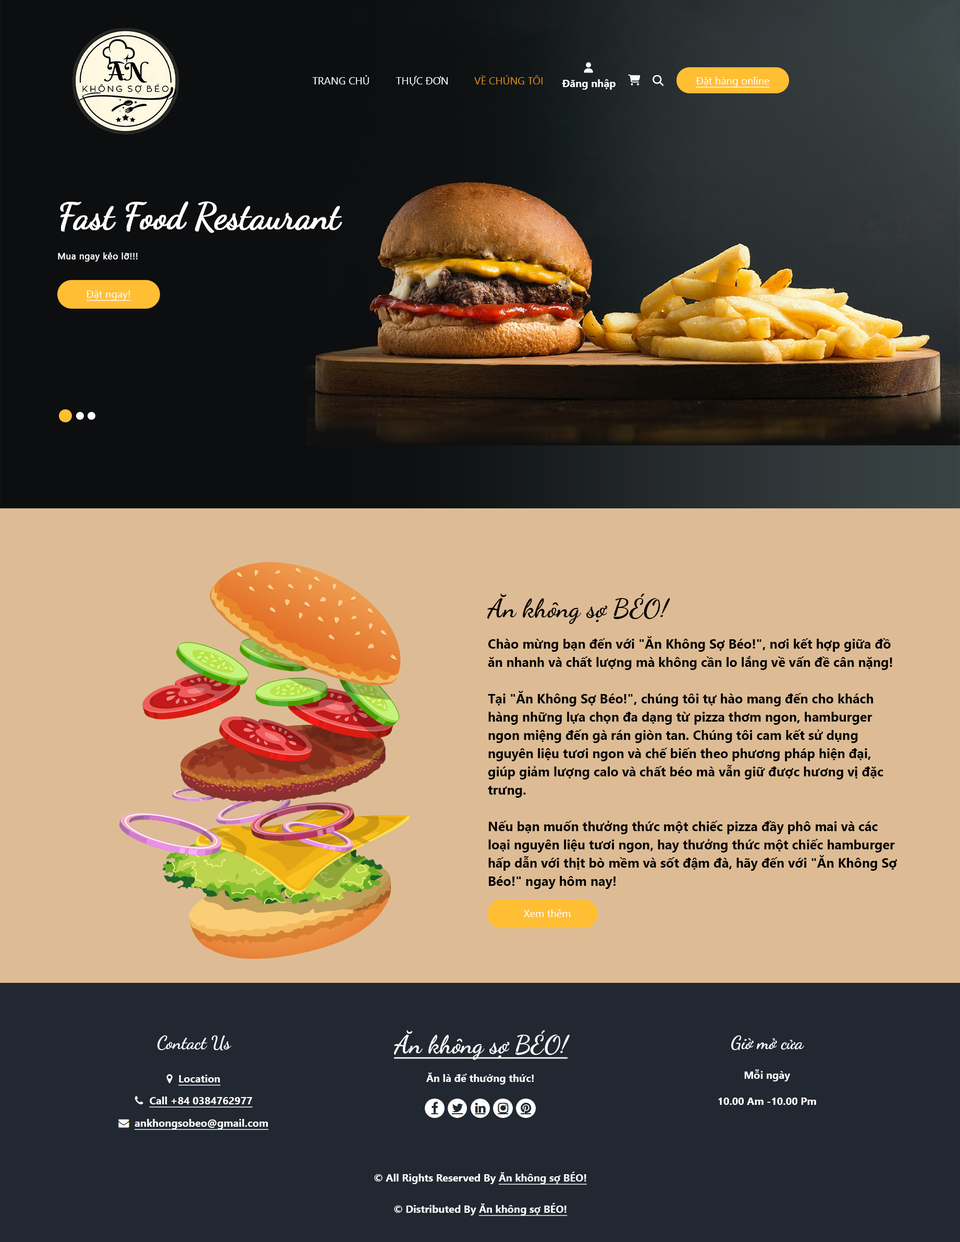
<style>
.page{position:relative;width:960px;height:1242px;background:#ddbc95}
.page>*{position:absolute;margin:0}
.t1{font:10.4px "SegoeUI";color:#ffffff}
.t2{font:10.4px "SegoeUI";color:#d18a19}
.t3{font:10.4px "SegoeUI";color:#ffffff;text-decoration:underline}
.t4{font:10.4px "SegoeUI-Bold";color:#ffffff}
.t5{font:36.5px "DancingScript-Regular";letter-spacing:-0.02em;color:#ffffff;font-weight:bold}
.t6{font:8.9px "SegoeUI";letter-spacing:0.023em;color:#ffffff;font-weight:bold}
.t7{font:26.1px "DancingScript-Bold";color:#000000}
.t8{font:13px/18.2px "SegoeUI-Bold";color:#000000}
.t9{font:18.2px "DancingScript-Bold";color:#ffffff}
.t10{font:25px "DancingScript-Bold";color:#ffffff;text-decoration:underline}
.t11{font:10.4px "SegoeUI-Bold";color:#ffffff;text-decoration:underline}
</style>
<div class="page">
<p class="t1" style="left:312px;top:75px;width:57px;height:9px">TRANG CHỦ</p>
<p class="t1" style="left:396px;top:76px;width:52px;height:10px">THỰC ĐƠN</p>
<p class="t2" style="left:474px;top:75px;width:69px;height:9px">VỀ CHÚNG TÔI</p>
<p class="t3" style="left:696px;top:77px;width:74px;height:11px">Đặt hàng online</p>
<p class="t4" style="left:562px;top:79px;width:54px;height:11px">Đăng nhập</p>
<p class="t5" style="left:60px;top:201px;width:283px;height:32px">Fast Food Restaurant</p>
<p class="t6" style="left:58px;top:252px;width:80px;height:10px">Mua ngay kẻo lỡ!!!</p>
<p class="t3" style="left:86px;top:290px;width:45px;height:11px">Đặt ngay!</p>
<p class="t7" style="left:487px;top:593px;width:183px;height:31px">Ăn không sợ BÉO!</p>
<p class="t8" style="left:488px;top:636px;width:409px;height:253px">Chào mừng bạn đến với "Ăn Không Sợ Béo!", nơi kết hợp giữa đồ ăn nhanh và chất lượng mà không cần lo lắng về vấn đề cân nặng!<br><br>Tại "Ăn Không Sợ Béo!", chúng tôi tự hào mang đến cho khách hàng những lựa chọn đa dạng từ pizza thơm ngon, hamburger ngon miệng đến gà rán giòn tan. Chúng tôi cam kết sử dụng nguyên liệu tươi ngon và chế biến theo phương pháp hiện đại, giúp giảm lượng calo và chất béo mà vẫn giữ được hương vị đặc trưng.<br><br>Nếu bạn muốn thưởng thức một chiếc pizza đầy phô mai và các loại nguyên liệu tươi ngon, hay thưởng thức một chiếc hamburger hấp dẫn với thịt bò mềm và sốt đậm đà, hãy đến với "Ăn Không Sợ Béo!" ngay hôm nay!</p>
<p class="t1" style="left:524px;top:909px;width:47px;height:8px">Xem thêm</p>
<p class="t9" style="left:157px;top:1035px;width:74px;height:15px">Contact Us</p>
<p class="t10" style="left:394px;top:1030px;width:176px;height:30px">Ăn không sợ BÉO!</p>
<p class="t9" style="left:731px;top:1035px;width:73px;height:15px">Giờ mở cửa</p>
<p class="t4" style="left:426px;top:1072px;width:108px;height:12px">Ăn là để thưởng thức!</p>
<p class="t4" style="left:744px;top:1069px;width:46px;height:12px">Mỗi ngày</p>
<p class="t11" style="left:178px;top:1074px;width:43px;height:11px">Location</p>
<p class="t11" style="left:149px;top:1096px;width:104px;height:11px">Call +84 0384762977</p>
<p class="t4" style="left:718px;top:1097px;width:98px;height:8px">10.00 Am -10.00 Pm</p>
<p class="t11" style="left:134px;top:1119px;width:135px;height:11px">ankhongsobeo@gmail.com</p>
<p class="t4" style="left:374px;top:1171px;width:213px;height:13px">© All Rights Reserved By <span class="t11">Ăn không sợ BÉO!</span></p>
<p class="t4" style="left:394px;top:1203px;width:174px;height:13px">© Distributed By <span class="t11">Ăn không sợ BÉO!</span></p>
</div>
